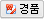
<style>
.page{position:relative;width:44px;height:19px}
.page>*{position:absolute;margin:0}
.t1{font:12px "morris9";color:#000000}
</style>
<div class="page">
<p class="t1" style="left:20px;top:4px;width:19px;height:10px">경품</p>
</div>
